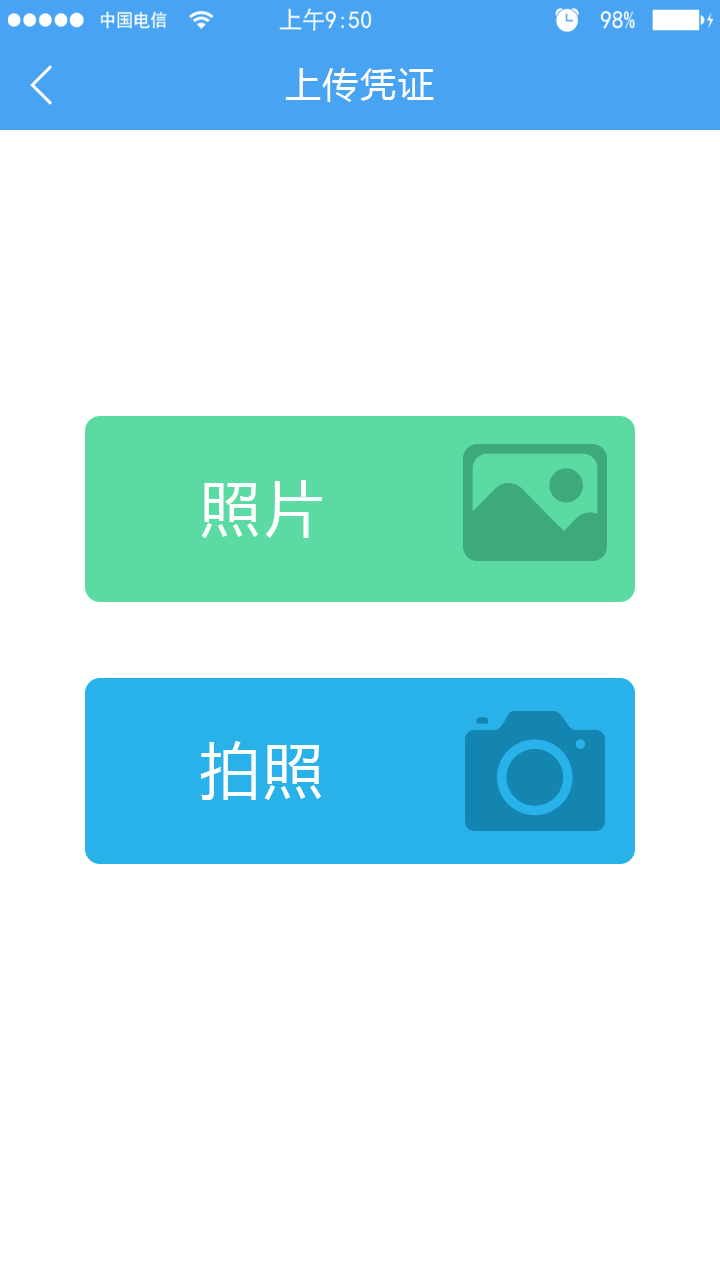
<style>
.page{position:relative;width:720px;height:1280px;background:#ffffff}
.page>*{position:absolute;margin:0}
.t1{font:36px "MicrosoftYaHei";letter-spacing:0.05em;color:#ffffff}
.t2{font:60px "MicrosoftYaHei";letter-spacing:0.05em;color:#ffffff}
</style>
<div class="page">
<p class="t1" style="left:285px;top:68px;width:149px;height:34px">上传凭证</p>
<p class="t2" style="left:201px;top:480px;width:121px;height:58px">照片</p>
<p class="t2" style="left:200px;top:741px;width:121px;height:59px">拍照</p>
</div>
